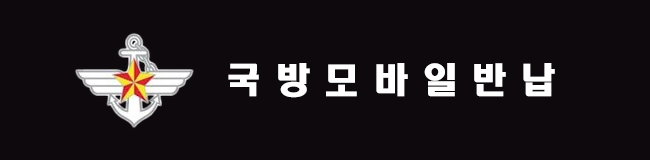
<style>
.page{position:relative;width:650px;height:160px;background:#0e090d}
.page>*{position:absolute;margin:0}
.t1{font:35px "HeadlineR-HM";letter-spacing:0.4em;color:#ffffff}
</style>
<div class="page">
<p class="t1" style="left:228px;top:63px;width:327px;height:35px">국방모바일반납</p>
</div>
